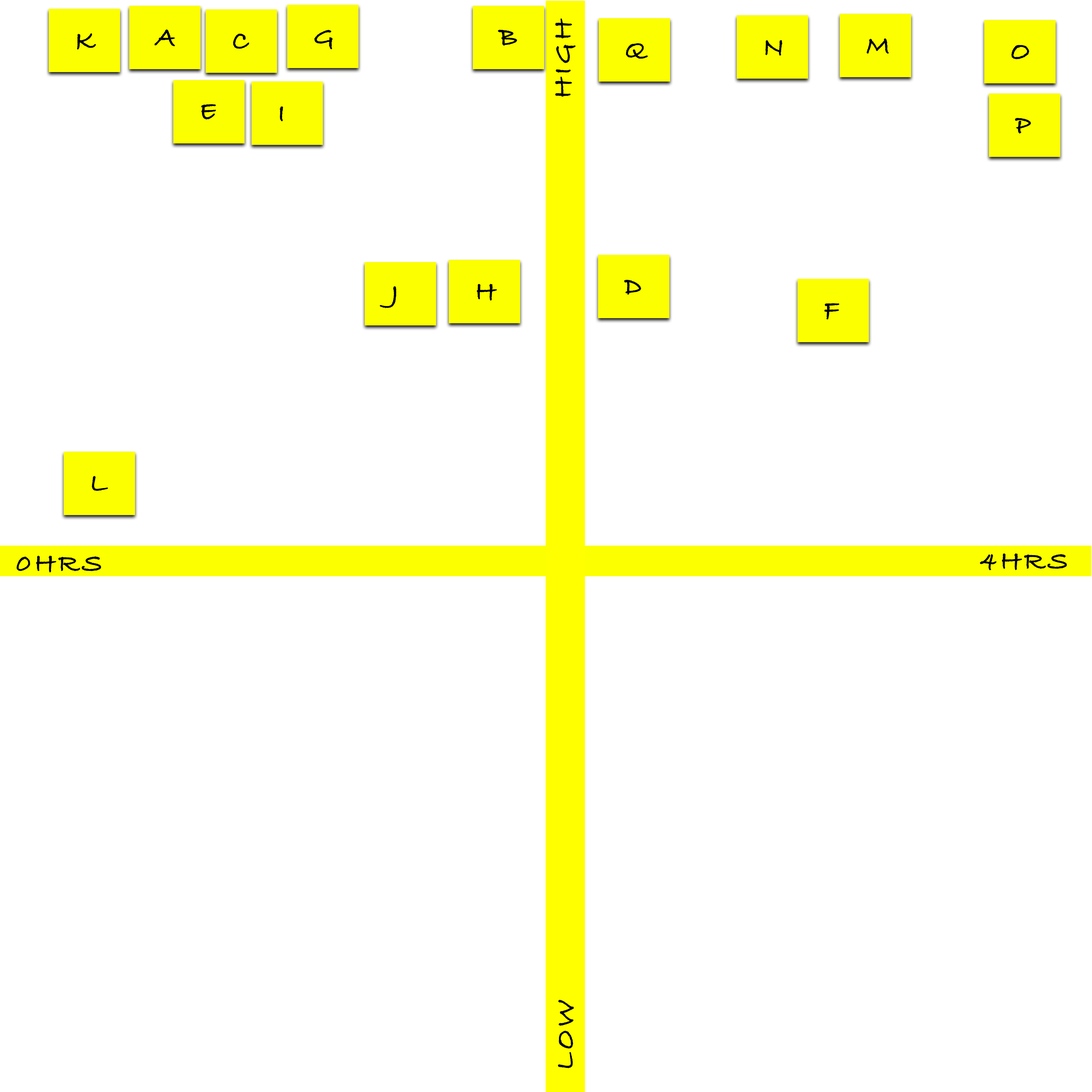
<style>
.page{position:relative;width:1092px;height:1092px;background:#ffffff}
.page>*{position:absolute;margin:0}
.t1{font:27.6px "BradleyHandITCTT-Bold";letter-spacing:0.12em;color:#000000;text-transform:uppercase}
</style>
<div class="page">
<p class="t1" style="left:154px;top:29px;width:21px;height:18px">A</p>
<p class="t1" style="left:314px;top:29px;width:19px;height:21px">G</p>
<p class="t1" style="left:498px;top:29px;width:19px;height:17px">B</p>
<p class="t1" style="left:555px;top:18px;width:20px;height:79px;rotate:-90deg">high</p>
<p class="t1" style="left:77px;top:33px;width:19px;height:17px">K</p>
<p class="t1" style="left:233px;top:33px;width:16px;height:16px">C</p>
<p class="t1" style="left:765px;top:40px;width:18px;height:16px">N</p>
<p class="t1" style="left:867px;top:38px;width:22px;height:16px">M</p>
<p class="t1" style="left:626px;top:43px;width:22px;height:16px">Q</p>
<p class="t1" style="left:1011px;top:45px;width:18px;height:14px">O</p>
<p class="t1" style="left:201px;top:104px;width:15px;height:16px">E</p>
<p class="t1" style="left:280px;top:106px;width:3px;height:15px">I</p>
<p class="t1" style="left:1015px;top:118px;width:16px;height:16px">P</p>
<p class="t1" style="left:624px;top:280px;width:17px;height:15px">D</p>
<p class="t1" style="left:380px;top:286px;width:16px;height:22px">J</p>
<p class="t1" style="left:477px;top:284px;width:20px;height:17px">H</p>
<p class="t1" style="left:824px;top:303px;width:15px;height:17px">F</p>
<p class="t1" style="left:92px;top:476px;width:16px;height:15px">L</p>
<p class="t1" style="left:16px;top:555px;width:85px;height:18px">0HRS</p>
<p class="t1" style="left:980px;top:553px;width:87px;height:17px">4hrs</p>
<p class="t1" style="left:558px;top:1000px;width:16px;height:68px;rotate:-90deg">low</p>
</div>
